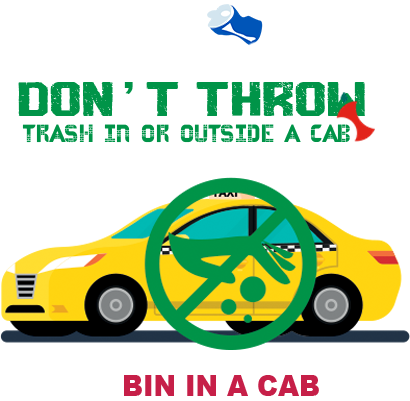
<style>
.page{position:relative;width:410px;height:401px;background:#ffffff}
.page>*{position:absolute;margin:0}
.t1{font:45.8px "vtksragwaris";color:#009448;scale:1.92 1}
.t2{font:45.8px "CenturyGothic";color:#009448;scale:1.92 1}
.t3{font:28.9px "ASVELASCARegular";color:#009448;scale:0.93 1}
.t4{font:28.9px "Arial-Black";color:#c61f48;scale:0.93 1}
</style>
<div class="page">
<p class="t1" style="left:18px;top:82px;width:347px;height:34px">Don<span class="t2">’</span>t throw</p>
<p class="t3" style="left:22px;top:124px;width:328px;height:19px">Trash in or outside a cab</p>
<p class="t4" style="left:124px;top:375px;width:195px;height:21px">BIN IN A CAB</p>
</div>
